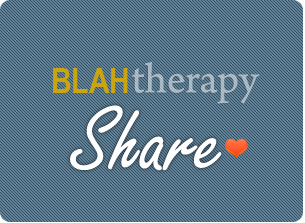
<style>
.page{position:relative;width:305px;height:223px;background:#648297}
.page>*{position:absolute;margin:0}
.t1{font:44.7px "ArnoPro-Regular"}
.t2{font:34.7px "ArialNarrow-Bold";color:#caa50f}
.t3{font:99px "FreestyleScript-Regular";color:#ffffff}
</style>
<div class="page">
<p class="t1" style="left:132px;top:61px;width:128px;height:43px">therapy</p>
<p class="t2" style="left:53px;top:68px;width:75px;height:25px">BLAH</p>
<p class="t3" style="left:70px;top:105px;width:152px;height:66px">Share</p>
</div>
